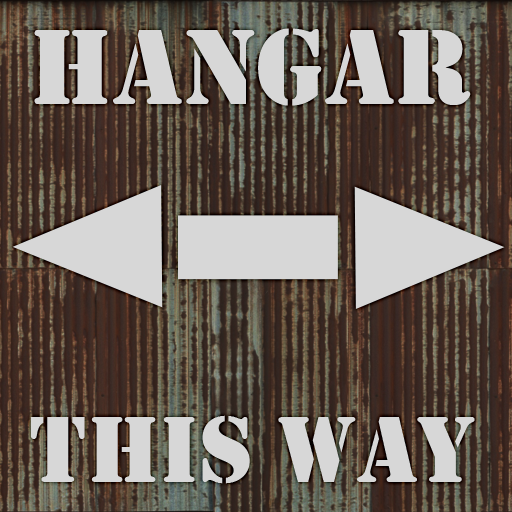
<style>
.page{position:relative;width:512px;height:512px;background:#d7d7d7}
.page>*{position:absolute;margin:0}
.t1{font:111.1px "Stencil";color:#d7d7d7}
.t2{font:97.2px "Stencil";color:#d7d7d7}
</style>
<div class="page">
<p class="t1" style="left:34px;top:28px;width:437px;height:78px">HANGAR</p>
<p class="t2" style="left:30px;top:415px;width:445px;height:69px">THIS WAY</p>
</div>
